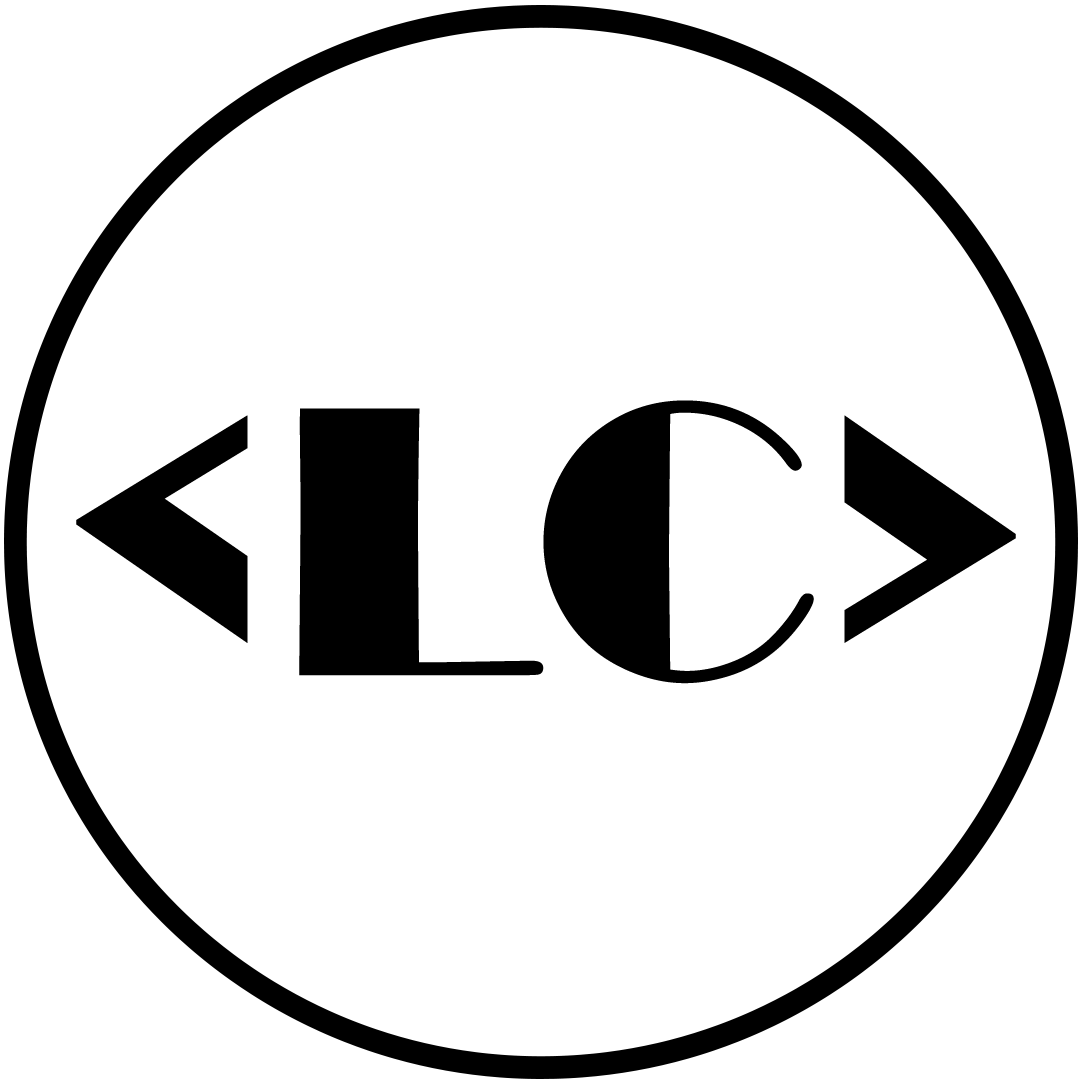
<style>
.page{position:relative;width:1080px;height:1080px;background:#ffffff}
.page>*{position:absolute;margin:0}
.t1{font:400.1px "Broadway";letter-spacing:0.037em;color:#000000}
</style>
<div class="page">
<p class="t1" style="left:76px;top:400px;width:940px;height:284px">&lt;LC&gt;</p>
</div>
